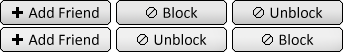
<style>
.page{position:relative;width:343px;height:52px}
.page>*{position:absolute;margin:0}
.t1{font:16px "Calibri";color:#000000}
</style>
<div class="page">
<p class="t1" style="left:28px;top:7px;width:71px;height:11px">Add Friend</p>
<p class="t1" style="left:163px;top:7px;width:35px;height:11px">Block</p>
<p class="t1" style="left:270px;top:7px;width:53px;height:11px">Unblock</p>
<p class="t1" style="left:28px;top:34px;width:71px;height:11px">Add Friend</p>
<p class="t1" style="left:154px;top:34px;width:53px;height:11px">Unblock</p>
<p class="t1" style="left:279px;top:34px;width:35px;height:11px">Block</p>
</div>
